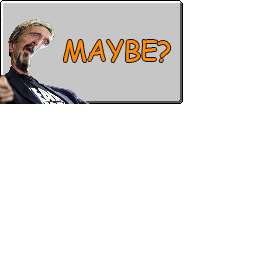
<style>
.page{position:relative;width:256px;height:256px;background:#ffffff}
.page>*{position:absolute;margin:0}
.t1{font:27.7px "ComicSansMS";letter-spacing:-0.02em;color:#ff8c00}
</style>
<div class="page">
<p class="t1" style="left:64px;top:40px;width:107px;height:22px">MAYBE?</p>
</div>
